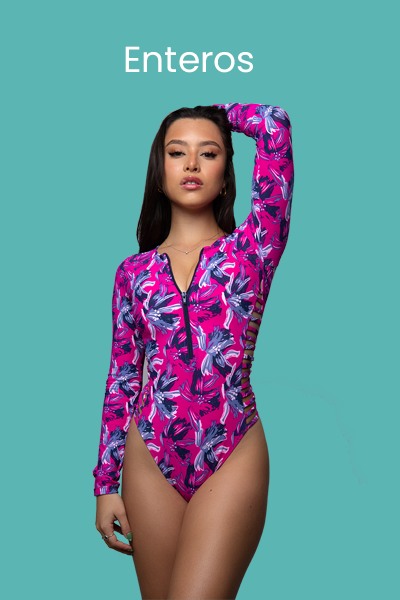
<style>
.page{position:relative;width:400px;height:600px;background:#5bb5b3}
.page>*{position:absolute;margin:0}
.t1{font:36px "Poppins-Regular";color:#ffffff}
</style>
<div class="page">
<p class="t1" style="left:125px;top:46px;width:128px;height:27px">Enteros</p>
</div>
